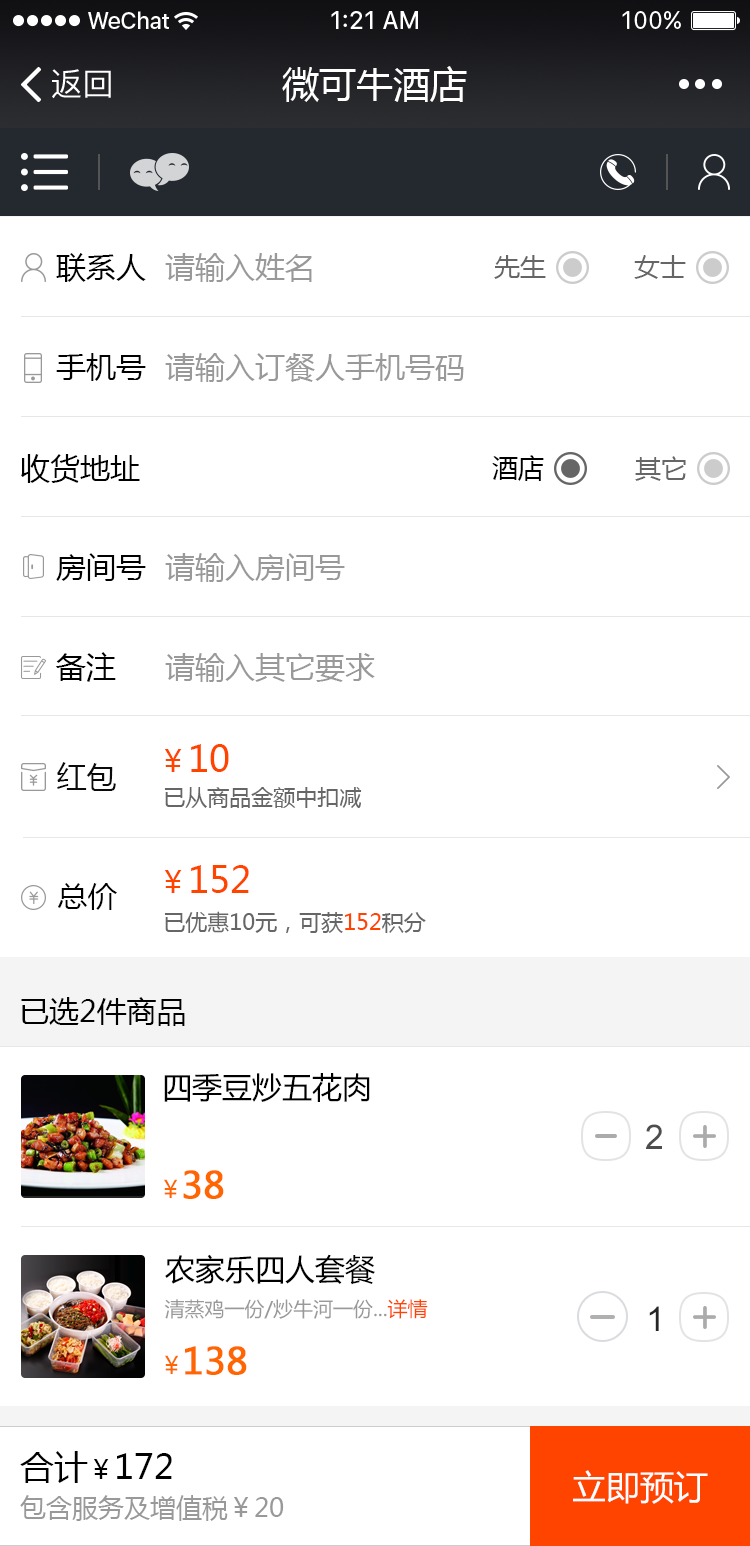
<style>
.page{position:relative;width:750px;height:1546px;background:#ffffff}
.page>*{position:absolute;margin:0}
.t1{font:32px "PingFangSC-Regular";color:#ffffff}
.t2{font:37px "MicrosoftYaHei";color:#ffffff}
.t3{font:30px "MicrosoftYaHei";color:#000000}
.t4{font:30px "MicrosoftYaHei";color:#999999}
.t5{font:26px "MicrosoftYaHei";color:#666666}
.t6{font:26px "MicrosoftYaHei";color:#000000}
.t7{font:36px "MicrosoftYaHei";color:#ff4400}
.t8{font:30px "MicrosoftYaHei";color:#ff4400}
.t9{font:30px "MicrosoftYaHei";color:#0a0a0a}
.t10{font:22px "MicrosoftYaHei";color:#666666}
.t11{font:36px "MicrosoftYaHei";color:#ff6600}
.t12{font:30px "MicrosoftYaHei";color:#ff6600}
.t13{font:22px "MicrosoftYaHei";color:#ff4400}
.t14{font:34px "ArialMT";color:#4d4d4d}
.t15{font:24px "MicrosoftYaHei";color:#ff6600}
.t16{font:36px "MicrosoftYaHei";color:#ff6600;font-weight:bold}
.t17{font:20px "MicrosoftYaHei";color:#999999}
.t18{font:20px "MicrosoftYaHei";color:#ff4400}
.t19{font:34px "ArialMT";color:#262626}
.t20{font:26px/45px "MicrosoftYaHei";color:#999999}
.t21{font:34px/45px "MicrosoftYaHei";color:#000000}
.t22{font:26px/45px "MicrosoftYaHei";color:#000000}
.t23{font:34px "MicrosoftYaHei";color:#ffffff}
</style>
<div class="page">
<p class="t1" style="left:52px;top:69px;width:59px;height:30px">返回</p>
<p class="t2" style="left:282px;top:66px;width:185px;height:36px">微可牛酒店</p>
<p class="t3" style="left:56px;top:253px;width:90px;height:29px">联系人</p>
<p class="t4" style="left:165px;top:253px;width:147px;height:29px">请输入姓名</p>
<p class="t5" style="left:494px;top:255px;width:52px;height:24px">先生</p>
<p class="t5" style="left:634px;top:255px;width:52px;height:24px">女士</p>
<p class="t3" style="left:56px;top:353px;width:90px;height:28px">手机号</p>
<p class="t4" style="left:165px;top:353px;width:299px;height:29px">请输入订餐人手机号码</p>
<p class="t3" style="left:21px;top:454px;width:119px;height:29px">收货地址</p>
<p class="t6" style="left:492px;top:455px;width:52px;height:26px">酒店</p>
<p class="t5" style="left:635px;top:456px;width:51px;height:25px">其它</p>
<p class="t3" style="left:56px;top:553px;width:90px;height:28px">房间号</p>
<p class="t4" style="left:165px;top:553px;width:180px;height:29px">请输入房间号</p>
<p class="t3" style="left:56px;top:652px;width:60px;height:30px">备注</p>
<p class="t4" style="left:165px;top:653px;width:210px;height:29px">请输入其它要求</p>
<p class="t7" style="left:164px;top:744px;width:65px;height:28px"><span class="t8">￥</span>10</p>
<p class="t9" style="left:57px;top:762px;width:59px;height:29px">红包</p>
<p class="t10" style="left:164px;top:787px;width:198px;height:21px"><span class="t11"><br></span>已从商品金额中扣减</p>
<p class="t7" style="left:164px;top:865px;width:85px;height:28px"><span class="t8">￥</span>152</p>
<p class="t3" style="left:58px;top:883px;width:59px;height:27px">总价</p>
<p class="t10" style="left:164px;top:911px;width:262px;height:22px"><span class="t12"><br></span>已优惠10元，可获<span class="t13">152</span>积分</p>
<p class="t3" style="left:21px;top:997px;width:164px;height:29px">已选2件商品</p>
<p class="t3" style="left:164px;top:1073px;width:206px;height:29px">四季豆炒五花肉</p>
<p class="t14" style="left:646px;top:1124px;width:16px;height:25px">2</p>
<p class="t15" style="left:164px;top:1179px;width:14px;height:19px">￥</p>
<p class="t16" style="left:183px;top:1170px;width:41px;height:29px">38</p>
<p class="t3" style="left:165px;top:1254px;width:210px;height:31px">农家乐四人套餐</p>
<p class="t17" style="left:164px;top:1299px;width:264px;height:20px">清蒸鸡一份/炒牛河一份...<span class="t18">详情</span></p>
<p class="t19" style="left:649px;top:1306px;width:10px;height:25px">1</p>
<p class="t16" style="left:185px;top:1346px;width:62px;height:29px">138</p>
<p class="t15" style="left:165px;top:1355px;width:14px;height:19px">￥</p>
<p class="t20" style="left:20px;top:1451px;width:264px;height:70px"><span class="t21">合计</span><span class="t22">￥</span><span class="t21">172<br></span>包含服务及增值税￥20</p>
<p class="t23" style="left:573px;top:1470px;width:135px;height:34px">立即预订</p>
</div>
